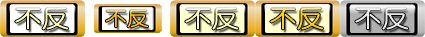
<style>
.page{position:relative;width:425px;height:37px}
.page>*{position:absolute;margin:0}
.t1{font:23.3px "YouYuan";color:#fffeb0;font-weight:bold;scale:1.14 1}
.t2{font:18.6px "YouYuan";color:#ffc600;font-weight:bold;scale:1.14 1}
.t3{font:23.3px "YouYuan";color:#ffd100;font-weight:bold;scale:1.14 1}
.t4{font:23.3px "YouYuan";color:#eaeaea;font-weight:bold;scale:1.14 1}
</style>
<div class="page">
<p class="t1" style="left:15px;top:7px;width:54px;height:23px">不反</p>
<p class="t2" style="left:105px;top:9px;width:43px;height:19px">不反</p>
<p class="t1" style="left:185px;top:7px;width:54px;height:23px">不反</p>
<p class="t3" style="left:270px;top:7px;width:54px;height:23px">不反</p>
<p class="t4" style="left:355px;top:7px;width:54px;height:23px">不反</p>
</div>
